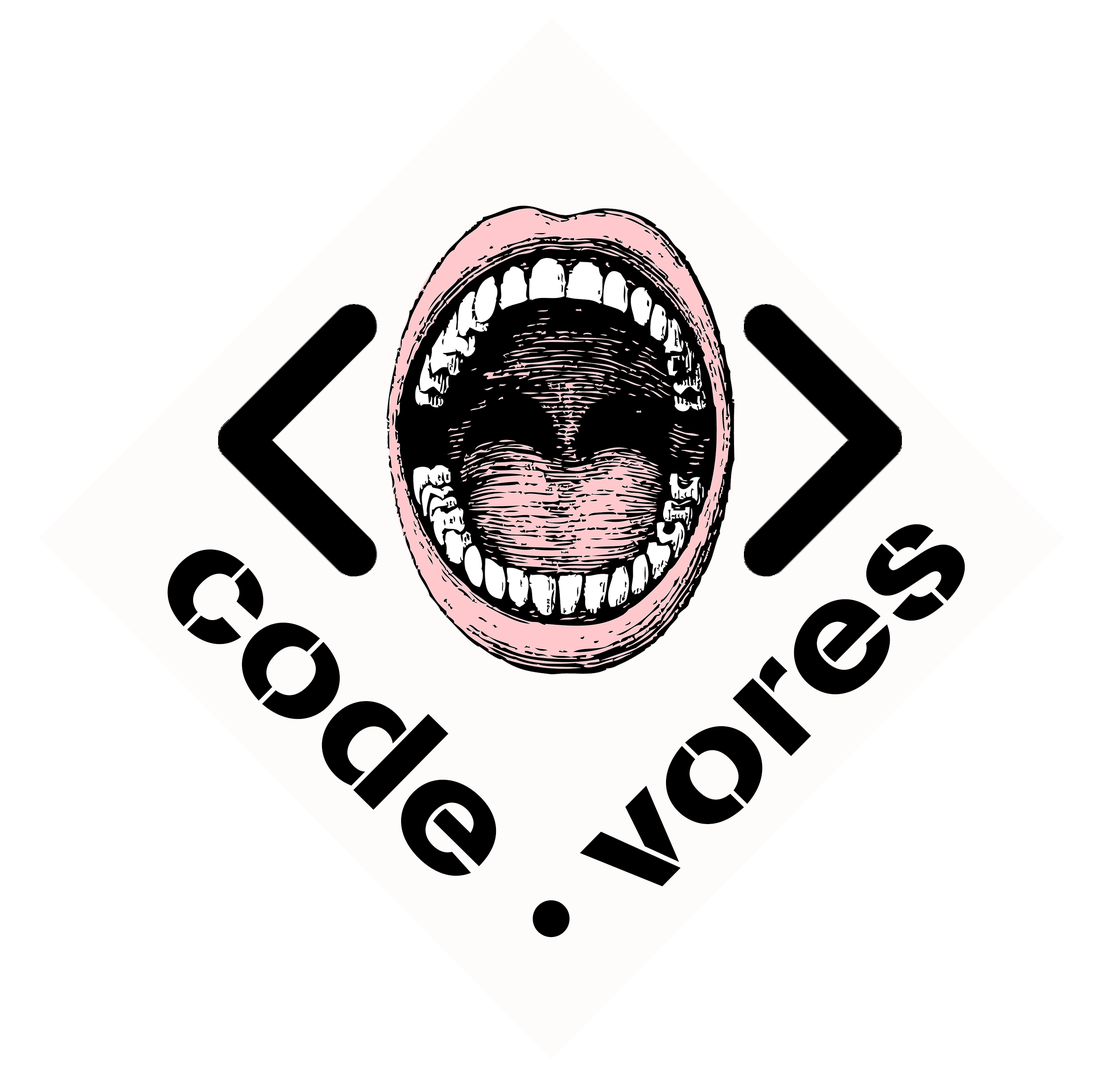
<style>
.page{position:relative;width:1104px;height:1080px;background:#ffffff}
.page>*{position:absolute;margin:0}
.t1{font:151.5px "AGBook-Stencil";color:#000000;scale:1.2 1}
</style>
<div class="page">
<p class="t1" style="left:580px;top:524px;width:385px;height:362px;rotate:-45deg">vores</p>
<p class="t1" style="left:168px;top:549px;width:329px;height:327px;rotate:45deg">code</p>
</div>
